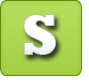
<style>
.page{position:relative;width:89px;height:84px;background:#ffffff}
.page>*{position:absolute;margin:0}
.t1{font:60px "Rockwell-ExtraBold";color:#fcfcfc}
</style>
<div class="page">
<p class="t1" style="left:23px;top:14px;width:34px;height:41px">S</p>
</div>
